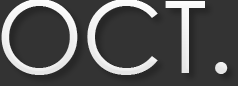
<style>
.page{position:relative;width:238px;height:86px;background:#333333}
.page>*{position:absolute;margin:0}
.t1{font:100px "CenturyGothic";color:#ffffff}
</style>
<div class="page">
<p class="t1" style="left:1px;top:0px;width:227px;height:75px">OCT.</p>
</div>
